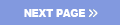
<style>
.page{position:relative;width:120px;height:25px;background:#8299df}
.page>*{position:absolute;margin:0}
.t1{font:18.2px "Arial-Black";color:#ffffff;scale:0.9 1}
</style>
<div class="page">
<p class="t1" style="left:24px;top:9px;width:62px;height:8px">NEXT PAGE</p>
</div>
